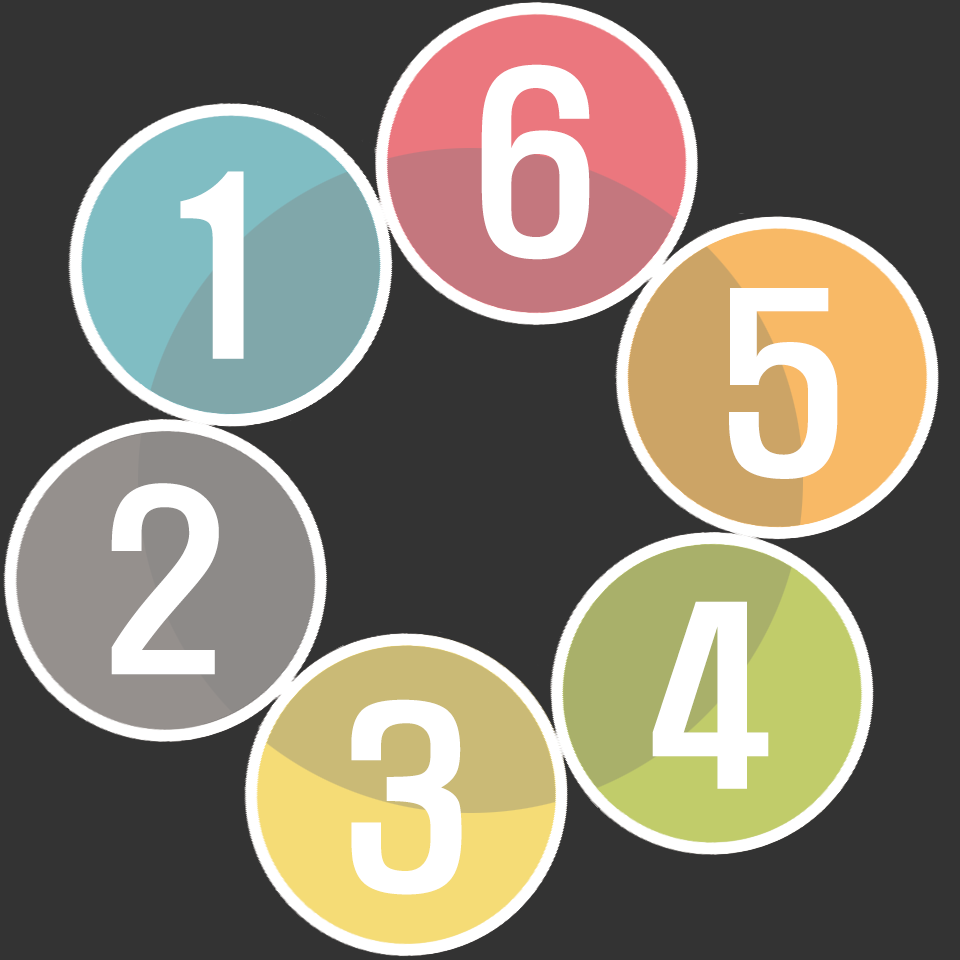
<style>
.page{position:relative;width:960px;height:960px;background:#333333}
.page>*{position:absolute;margin:0}
.t1{font:220px "H2hdrM";color:#ffffff}
</style>
<div class="page">
<p class="t1" style="left:481px;top:64px;width:109px;height:196px">6</p>
<p class="t1" style="left:180px;top:171px;width:64px;height:188px">1</p>
<p class="t1" style="left:729px;top:288px;width:109px;height:191px">5</p>
<p class="t1" style="left:111px;top:483px;width:108px;height:192px">2</p>
<p class="t1" style="left:652px;top:601px;width:117px;height:188px">4</p>
<p class="t1" style="left:351px;top:699px;width:111px;height:196px">3</p>
</div>
